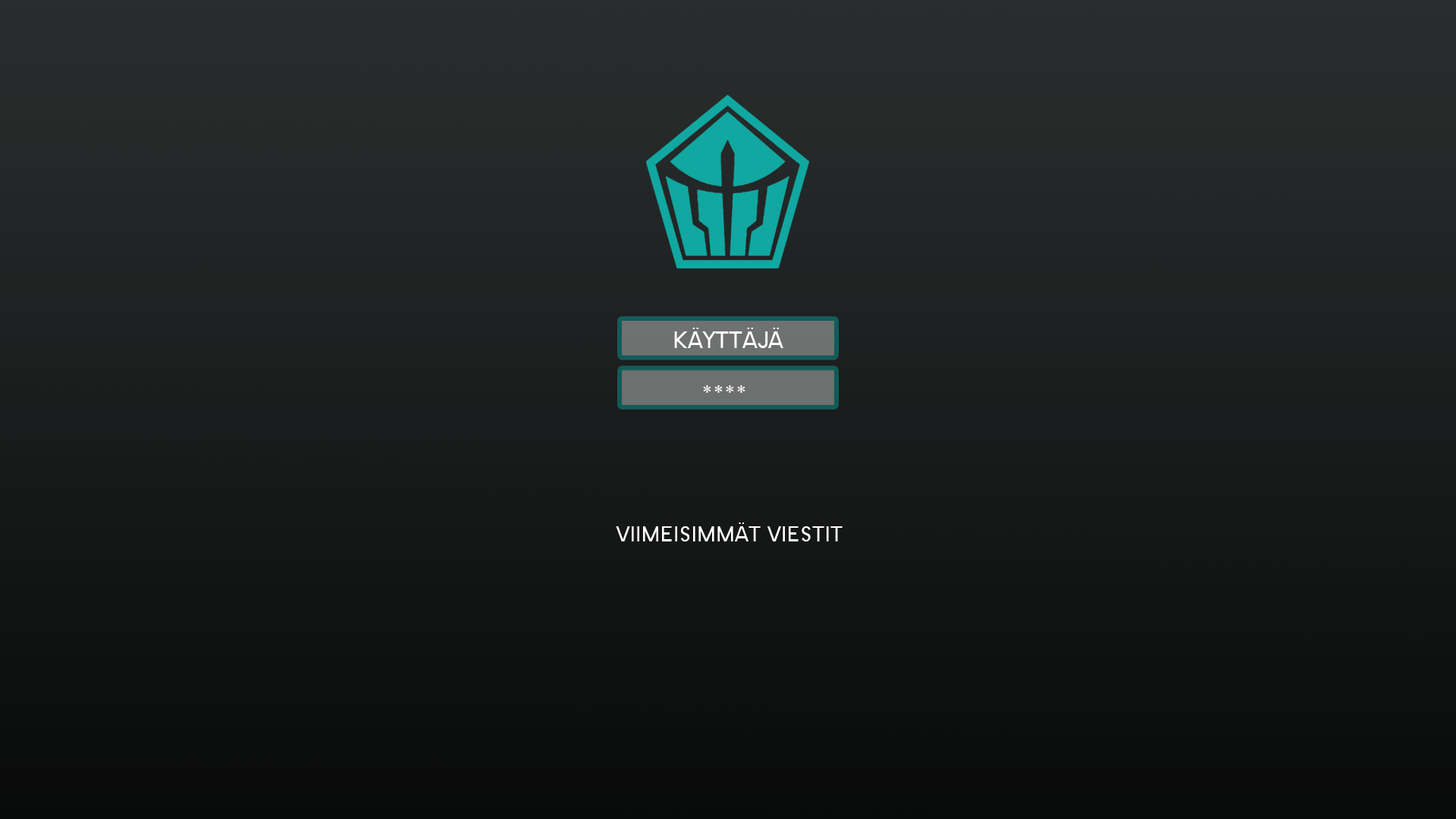
<style>
.page{position:relative;width:1456px;height:819px}
.page>*{position:absolute;margin:0}
.t1{font:25px "SFNewRepublic";color:#ffffff}
.t2{font:22.7px "SFNewRepublic";color:#ffffff}
</style>
<div class="page">
<p class="t1" style="left:674px;top:328px;width:109px;height:20px">KÄYTTÄJÄ</p>
<p class="t1" style="left:703px;top:385px;width:42px;height:8px">****</p>
<p class="t2" style="left:616px;top:522px;width:226px;height:19px">VIIMEISIMMÄT VIESTIT</p>
</div>
